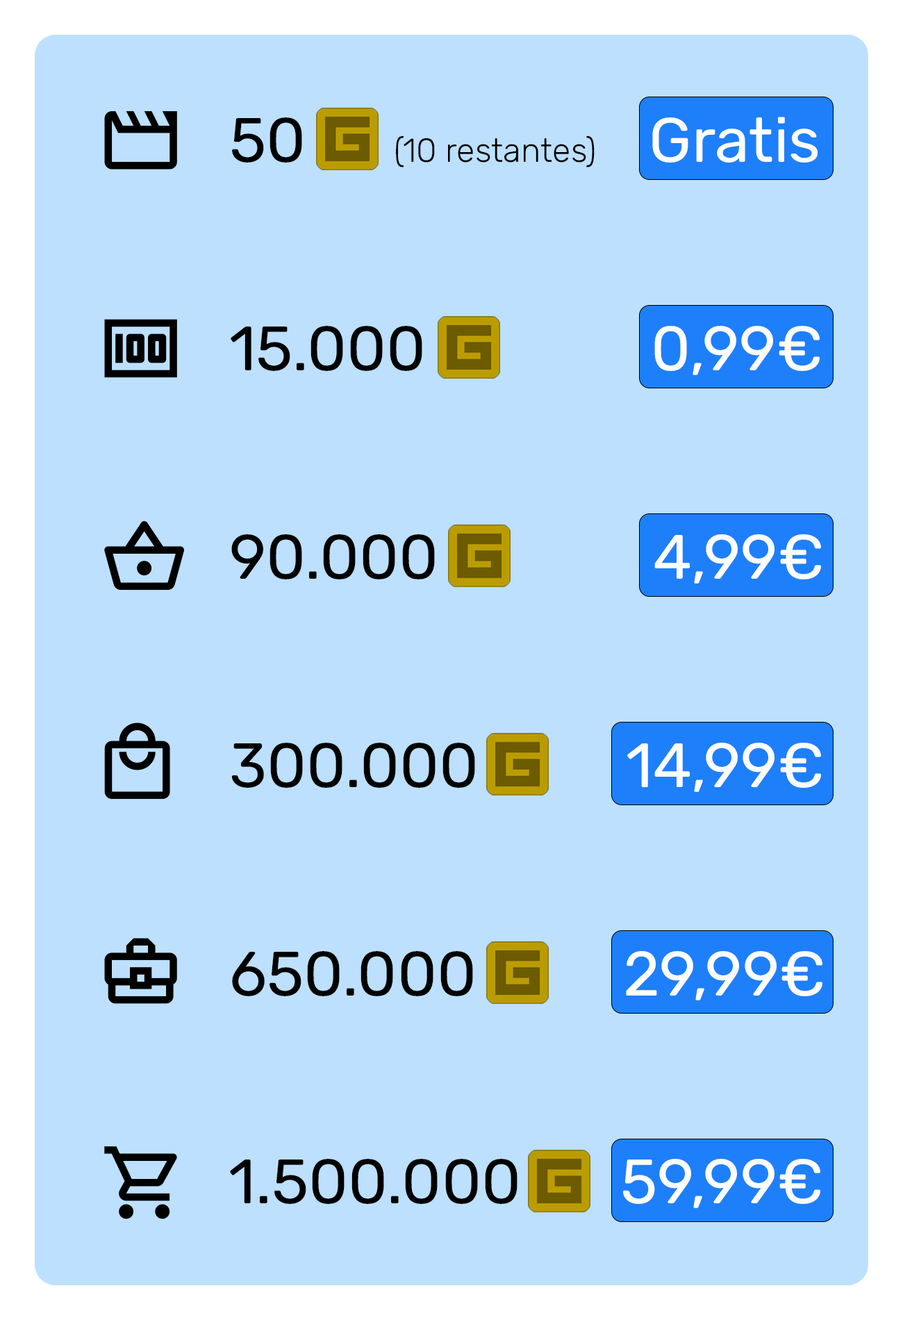
<style>
.page{position:relative;width:903px;height:1320px;background:#bce0fd}
.page>*{position:absolute;margin:0}
.t1{font:62.5px "Rubik-Regular";color:#000000}
.t2{font:62.5px "Rubik-Regular";color:#ffffff}
</style>
<div class="page">
<p class="t1" style="left:231px;top:326px;width:589px;height:49px">15.000                <span class="t2">0,99€</span></p>
<p class="t1" style="left:231px;top:534px;width:590px;height:50px">90.000                 <span class="t2">4,99€</span></p>
<p class="t1" style="left:231px;top:743px;width:590px;height:49px">300.000            <span class="t2">14,99€</span></p>
<p class="t1" style="left:232px;top:951px;width:591px;height:50px">650.000            <span class="t2">29,99€</span></p>
<p class="t1" style="left:230px;top:1159px;width:591px;height:49px">1.500.000       <span class="t2">59,99€</span></p>
</div>
